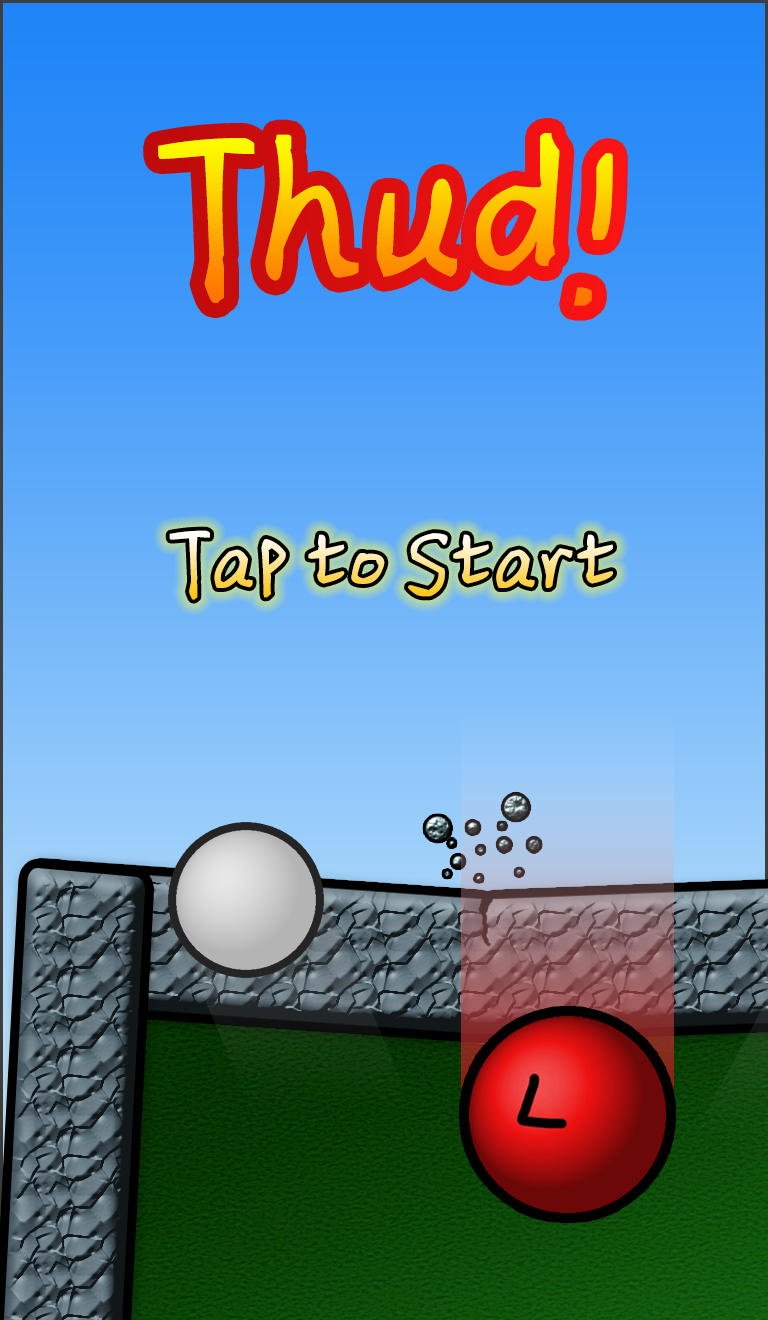
<style>
.page{position:relative;width:768px;height:1320px}
.page>*{position:absolute;margin:0}
.t1{font:240px "SentyMARUKO"}
.t2{font:100px "SentyMARUKO"}
</style>
<div class="page">
<p class="t1" style="left:158px;top:133px;width:455px;height:173px">Thud!</p>
<p class="t2" style="left:169px;top:530px;width:444px;height:70px">Tap to Start</p>
</div>
